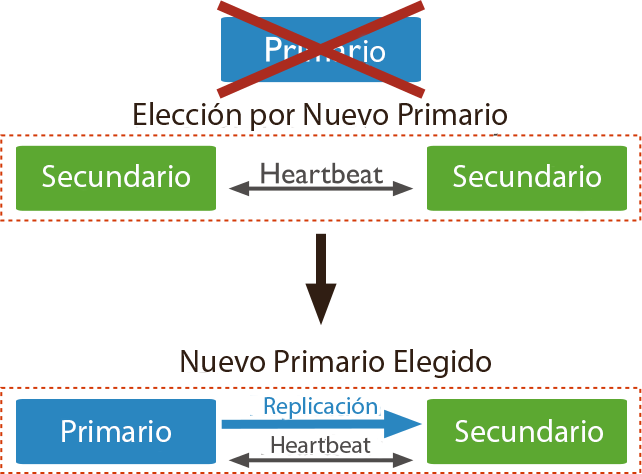
<style>
.page{position:relative;width:642px;height:474px;background:#ffffff}
.page>*{position:absolute;margin:0}
.t1{font:32px "MyriadPro-Regular";color:#ffffff}
.t2{font:32px "MyriadPro-Regular";color:#301e13}
.t3{font:32px "MyriadPro-Regular";color:#fefefe}
.t4{font:24px "MyriadPro-Regular";color:#2a86c0}
.t5{font:24px "MyriadPro-Regular";color:#4f4c4b}
</style>
<div class="page">
<p class="t1" style="left:364px;top:40px;width:21px;height:22px">io</p>
<p class="t2" style="left:134px;top:102px;width:373px;height:29px">Elección por Nuevo Primario</p>
<p class="t3" style="left:42px;top:164px;width:148px;height:23px">Secundario</p>
<p class="t3" style="left:453px;top:164px;width:148px;height:23px">Secundario</p>
<p class="t2" style="left:181px;top:349px;width:310px;height:29px">Nuevo Primario Elegido</p>
<p class="t4" style="left:264px;top:397px;width:113px;height:22px">Replicación</p>
<p class="t1" style="left:62px;top:420px;width:109px;height:22px">Primario</p>
<p class="t3" style="left:455px;top:419px;width:148px;height:23px">Secundario</p>
<p class="t5" style="left:271px;top:436px;width:100px;height:17px">Heartbeat</p>
</div>
